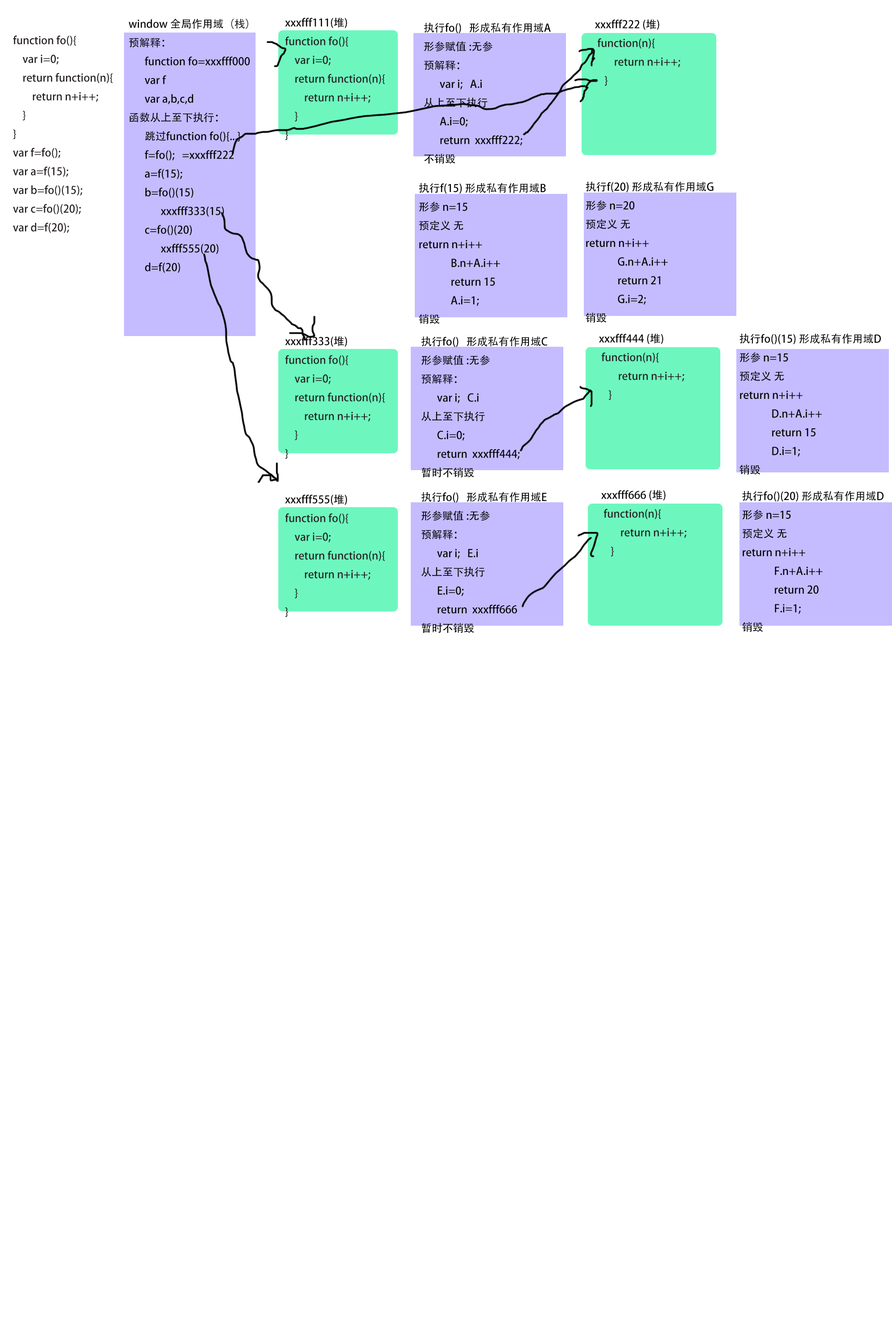
<style>
.page{position:relative;width:892px;height:1337px;background:#ffffff}
.page>*{position:absolute;margin:0}
.t1{font:10.7px "AdobeHeitiStd-Regular";color:#251e1e}
.t2{font:10.7px "AdobeHeitiStd-Regular";color:#030303}
</style>
<div class="page">
<p class="t1" style="left:285px;top:17px;width:100px;height:123px"><span class="t2">xxxfff111(堆)<br></span>function fo(){<br>    var i=0;<br>    return function(n){<br>        return n+i++;<br>    }<br>}</p>
<p class="t2" style="left:128px;top:19px;width:122px;height:254px">window 全局作用域（栈）<br>预解释：<br> function fo=xxxfff000<br> var f<br> var a,b,c,d<br>函数从上至下执行：<br> 跳过function fo(){...}<br> f=fo();   =xxxfff222<br> a=f(15);<br> b=fo()(15)<br>  xxxfff333(15)<br> c=fo()(20)<br>  xxfff555(20)<br> d=f(20)</p>
<p class="t2" style="left:424px;top:22px;width:127px;height:142px">执行fo()   形成私有作用域A<br>形参赋值 :无参<br>预解释：<br> var i;   A.i<br>从上至下执行<br> A.i=0;<br> return  xxxfff222;<br>不销毁</p>
<p class="t1" style="left:595px;top:19px;width:85px;height:67px"><span class="t2">xxxfff222 (堆)<br></span> function(n){<br>        return n+i++;<br>    }</p>
<p class="t1" style="left:13px;top:35px;width:100px;height:198px">function fo(){<br>    var i=0;<br>    return function(n){<br>        return n+i++;<br>    }<br>}<br>var f=fo();<br>var a=f(15);<br>var b=fo()(15);<br>var c=fo()(20);<br>var d=f(20);</p>
<p class="t2" style="left:419px;top:183px;width:127px;height:141px">执行f(15) 形成私有作用域B<br>形参 n=15<br>预定义 无<br>return n+i++     <br>  B.n+A.i++ <br>  return 15<br>  A.i=1;<br>销毁</p>
<p class="t2" style="left:585px;top:181px;width:128px;height:142px">执行f(20) 形成私有作用域G<br>形参 n=20<br>预定义 无<br>return n+i++     <br>  G.n+A.i++ <br>  return 21<br>  G.i=2;<br>销毁</p>
<p class="t1" style="left:285px;top:336px;width:100px;height:123px"><span class="t2">xxxfff333(堆)<br></span>function fo(){<br>    var i=0;<br>    return function(n){<br>        return n+i++;<br>    }<br>}</p>
<p class="t2" style="left:421px;top:336px;width:126px;height:142px">执行fo()   形成私有作用域C<br>形参赋值 :无参<br>预解释：<br> var i;   C.i<br>从上至下执行<br> C.i=0;<br> return  xxxfff444;<br>暂时不销毁</p>
<p class="t1" style="left:599px;top:333px;width:85px;height:67px"><span class="t2">xxxfff444 (堆)<br></span> function(n){<br>        return n+i++;<br>    }</p>
<p class="t2" style="left:739px;top:333px;width:141px;height:142px">执行fo()(15) 形成私有作用域D<br>形参 n=15<br>预定义 无<br>return n+i++     <br>  D.n+A.i++ <br>  return 15<br>  D.i=1;<br>销毁</p>
<p class="t1" style="left:285px;top:494px;width:100px;height:123px"><span class="t2">xxxfff555(堆)<br></span>function fo(){<br>    var i=0;<br>    return function(n){<br>        return n+i++;<br>    }<br>}</p>
<p class="t2" style="left:421px;top:492px;width:126px;height:141px">执行fo()   形成私有作用域E<br>形参赋值 :无参<br>预解释：<br> var i;   E.i<br>从上至下执行<br> E.i=0;<br> return  xxxfff666<br>暂时不销毁</p>
<p class="t1" style="left:601px;top:490px;width:85px;height:67px"><span class="t2">xxxfff666 (堆)<br></span> function(n){<br>        return n+i++;<br>    }</p>
<p class="t2" style="left:742px;top:491px;width:141px;height:141px">执行fo()(20) 形成私有作用域D<br>形参 n=15<br>预定义 无<br>return n+i++     <br>  F.n+A.i++ <br>  return 20<br>  F.i=1;<br>销毁</p>
</div>
